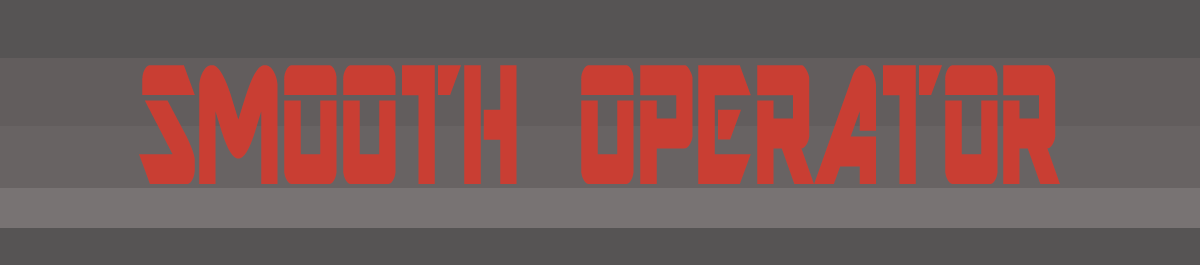
<style>
.page{position:relative;width:1200px;height:265px;background:#565454}
.page>*{position:absolute;margin:0}
.t1{font:188.4px "ARDESTINE";color:#c93e33;scale:0.55 1}
</style>
<div class="page">
<p class="t1" style="left:139px;top:65px;width:921px;height:119px">SMOOTH OPERATOR</p>
</div>
